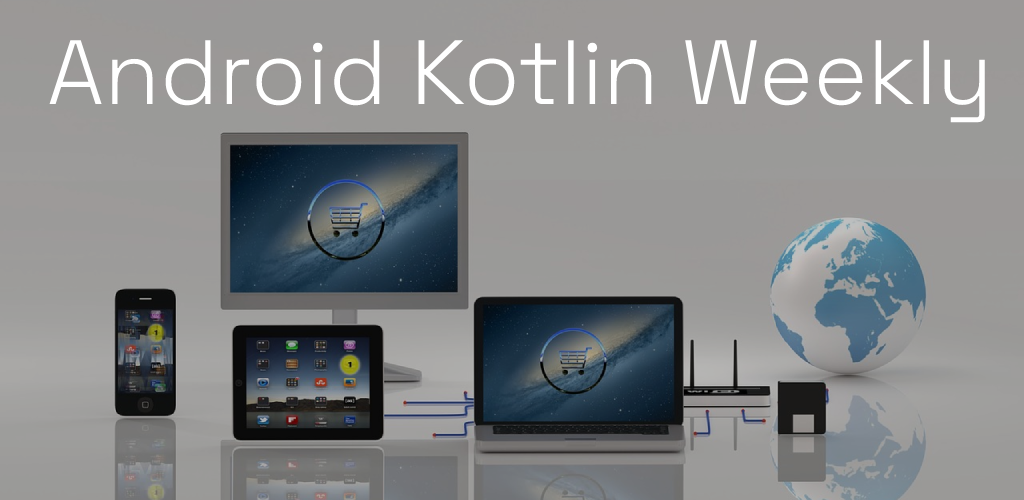
<style>
.page{position:relative;width:1024px;height:500px}
.page>*{position:absolute;margin:0}
.t1{font:91px "SpaceGrotesk-Light";color:#ffffff}
</style>
<div class="page">
<p class="t1" style="left:49px;top:40px;width:936px;height:83px">Android Kotlin Weekly</p>
</div>
